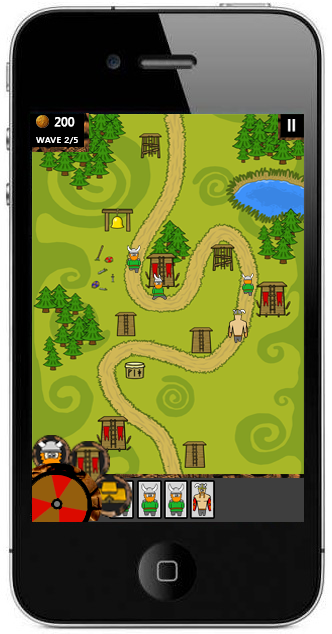
<style>
.page{position:relative;width:332px;height:634px}
.page>*{position:absolute;margin:0}
.t1{font:12px "SegoeUI";color:#ffffff;font-weight:bold}
.t2{font:8.1px "SegoeUI";color:#ffffff;font-weight:bold;scale:1.15 1}
</style>
<div class="page">
<p class="t1" style="left:54px;top:117px;width:21px;height:10px">200</p>
<p class="t2" style="left:36px;top:137px;width:42px;height:7px">WAVE 2/5</p>
</div>
